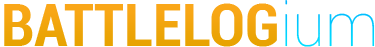
<style>
.page{position:relative;width:375px;height:47px;background:#ffffff}
.page>*{position:absolute;margin:0}
.t1{font:60px "Roboto-BoldCondensed";color:#f1a50d}
.t2{font:60px "Roboto-Thin";color:#00ceff}
.t3{font:60px "Roboto-BoldCondensed";color:#00ceff}
</style>
<div class="page">
<p class="t1" style="left:4px;top:3px;width:273px;height:44px">BATTLELOG</p>
<p class="t2" style="left:285px;top:0px;width:90px;height:47px"><span class="t3">         </span>ium</p>
</div>
